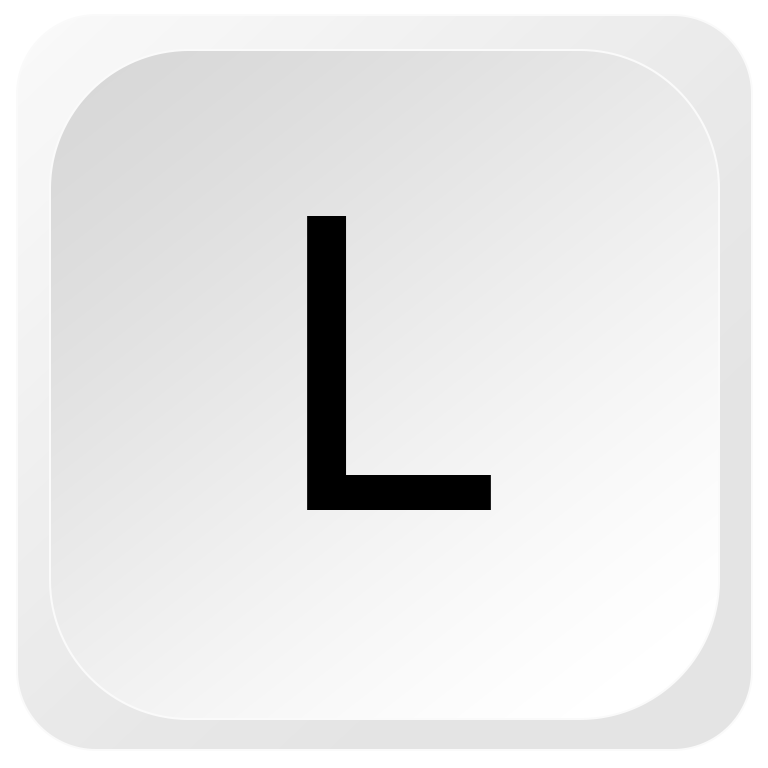
<style>
.page{position:relative;width:768px;height:768px}
.page>*{position:absolute;margin:0}
.t1{font:411px "ArialMT";color:#000000}
</style>
<div class="page">
<p class="t1" style="left:307px;top:216px;width:184px;height:294px">L</p>
</div>
